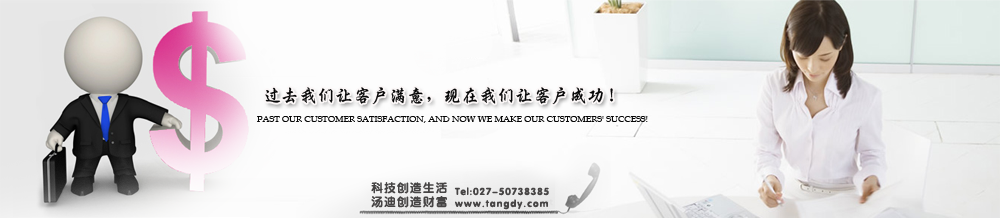
<style>
.page{position:relative;width:1000px;height:218px}
.page>*{position:absolute;margin:0}
.t1{font:18px "SingkaiEG-Bold-GB";color:#060606;text-transform:uppercase}
.t2{font:9px "BookAntiqua";color:#060606;text-transform:uppercase}
.t3{font:12px/14px "FZY4JW--GB1-0";letter-spacing:0.075em;color:#464444;text-transform:uppercase}
.t4{font:10px/12px "FZY4JW--GB1-0";letter-spacing:0.075em;color:#464444}
.t5{font:10px/12px "FZY4JW--GB1-0";letter-spacing:0.12em;color:#464444}
</style>
<div class="page">
<p class="t1" style="left:265px;top:87px;width:348px;height:18px">过去我们让客户满意，现在我们让客户成功！</p>
<p class="t2" style="left:257px;top:116px;width:391px;height:7px">Past our customer satisfaction, and now we make our customers' success!</p>
<p class="t3" style="left:371px;top:182px;width:77px;height:26px">科技创造生活<br>汤迪创造财富</p>
<p class="t4" style="left:454px;top:187px;width:95px;height:23px">Tel:027-50738385<br><span class="t5">www.tangdy.com</span></p>
</div>
